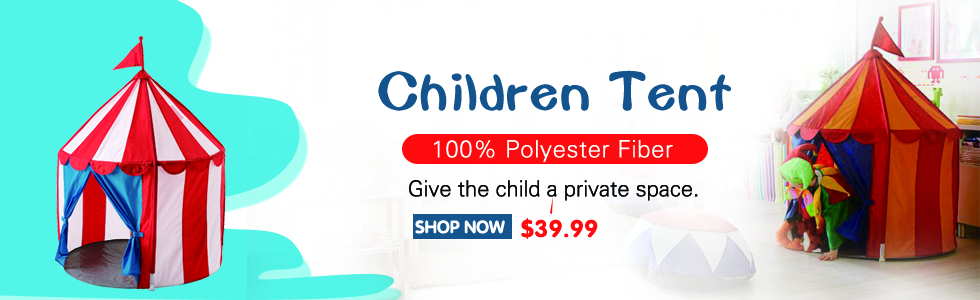
<style>
.page{position:relative;width:980px;height:300px;background:#ffffff}
.page>*{position:absolute;margin:0}
.t1{font:60px "FZSEJW--GB1-0";color:#13548f}
.t2{font:24px "FZY1JW--GB1-0";letter-spacing:0.025em;color:#f9ffff}
.t3{font:22px "FZY1JW--GB1-0";color:#040606}
.t4{font:18px "FZY4JW--GB1-0";color:#ffffff}
.t5{font:24px "FZY4JW--GB1-0";letter-spacing:0.025em;color:#ff0a0e}
</style>
<div class="page">
<p class="t1" style="left:378px;top:70px;width:353px;height:41px">Children Tent</p>
<p class="t2" style="left:434px;top:140px;width:239px;height:22px">100% Polyester Fiber</p>
<p class="t3" style="left:409px;top:180px;width:289px;height:21px">Give the child a private space.</p>
<p class="t4" style="left:415px;top:220px;width:90px;height:14px">SHOP NOW</p>
<p class="t5" style="left:521px;top:217px;width:77px;height:23px">$39.99</p>
</div>
